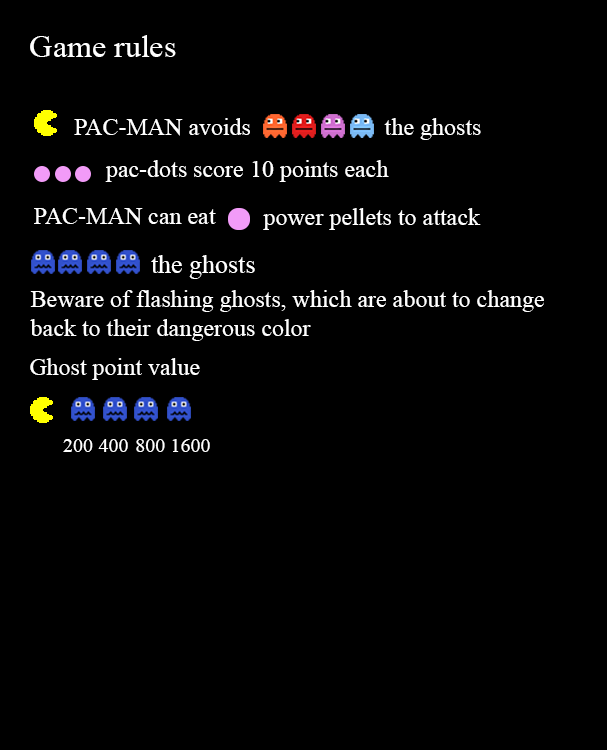
<style>
.page{position:relative;width:607px;height:750px;background:#000000}
.page>*{position:absolute;margin:0}
.t1{font:32px "TimesNewRomanPSMT";color:#ffffff}
.t2{font:24px "TimesNewRomanPSMT";color:#ffffff}
.t3{font:26px "TimesNewRomanPSMT";color:#ffffff}
.t4{font:20px "TimesNewRomanPSMT";color:#ffffff}
</style>
<div class="page">
<p class="t1" style="left:30px;top:35px;width:146px;height:22px">Game rules</p>
<p class="t2" style="left:74px;top:118px;width:176px;height:18px">PAC-MAN avoids</p>
<p class="t2" style="left:384px;top:118px;width:97px;height:22px">the ghosts</p>
<p class="t2" style="left:105px;top:160px;width:284px;height:22px">pac-dots score 10 points each</p>
<p class="t2" style="left:34px;top:208px;width:182px;height:17px">PAC-MAN can eat</p>
<p class="t2" style="left:263px;top:208px;width:218px;height:22px">power pellets to attack</p>
<p class="t3" style="left:151px;top:255px;width:104px;height:24px">the ghosts</p>
<p class="t2" style="left:30px;top:290px;width:514px;height:51px">Beware of flashing ghosts, which are about to change<br>back to their dangerous color</p>
<p class="t2" style="left:30px;top:358px;width:170px;height:22px">Ghost point value</p>
<p class="t4" style="left:63px;top:439px;width:30px;height:13px">200</p>
<p class="t4" style="left:98px;top:439px;width:30px;height:13px">400</p>
<p class="t4" style="left:136px;top:439px;width:29px;height:13px">800</p>
<p class="t4" style="left:172px;top:439px;width:38px;height:13px">1600</p>
</div>
